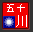
<style>
.page{position:relative;width:33px;height:32px;background:#f20000}
.page>*{position:absolute;margin:0}
.t1{font:10.4px "SimSun";color:#ffffff}
.t2{font:11.7px "SimSun";color:#ffffff}
</style>
<div class="page">
<p class="t1" style="left:7px;top:4px;width:18px;height:8px">五十</p>
<p class="t2" style="left:16px;top:15px;width:11px;height:12px">川</p>
</div>
